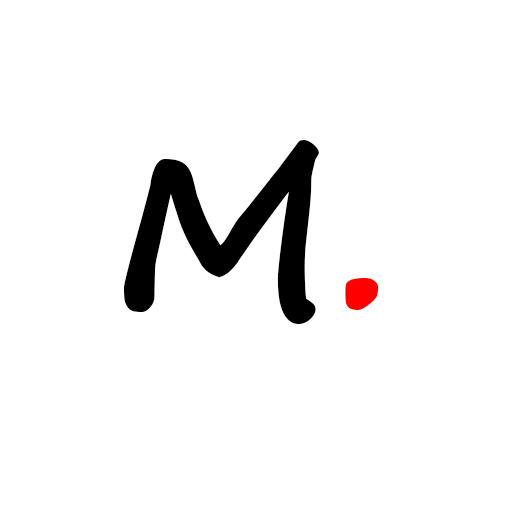
<style>
.page{position:relative;width:512px;height:512px;background:#ffffff}
.page>*{position:absolute;margin:0}
.t1{font:223px "SegoeScript-Bold";color:#000000}
.t2{font:223px "SegoeScript-Bold";color:#ff0000}
</style>
<div class="page">
<p class="t1" style="left:124px;top:140px;width:255px;height:184px">M<span class="t2">.</span></p>
</div>
